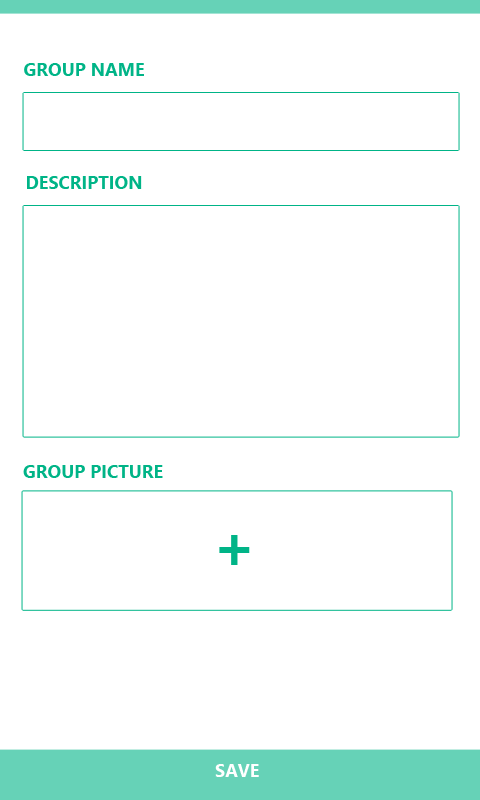
<style>
.page{position:relative;width:480px;height:800px;background:#ffffff}
.page>*{position:absolute;margin:0}
.t1{font:18px "SegoeUI-Bold";color:#00b487}
.t2{font:63.5px "SegoeUI-Bold";color:#00b487}
.t3{font:18px "SegoeUI-Bold";color:#ffffff}
</style>
<div class="page">
<p class="t1" style="left:24px;top:63px;width:120px;height:13px">GROUP NAME</p>
<p class="t1" style="left:27px;top:176px;width:115px;height:13px">DESCRIPTION</p>
<p class="t1" style="left:23px;top:465px;width:140px;height:13px">GROUP PICTURE</p>
<p class="t2" style="left:219px;top:535px;width:31px;height:30px">+</p>
<p class="t3" style="left:215px;top:764px;width:44px;height:13px">SAVE</p>
</div>
